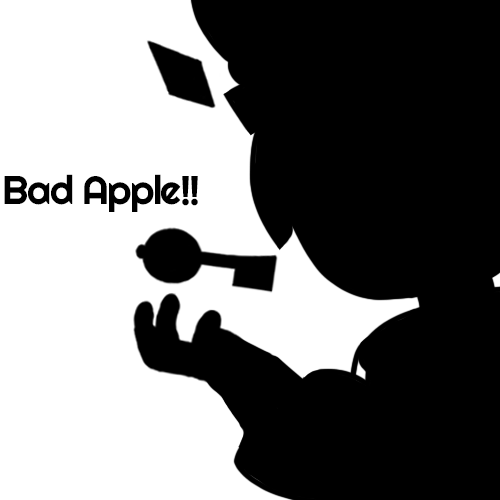
<style>
.page{position:relative;width:500px;height:500px;background:#000000}
.page>*{position:absolute;margin:0}
.t1{font:40px "Righteous-Regular";letter-spacing:-0.04em;color:#000000}
</style>
<div class="page">
<p class="t1" style="left:4px;top:174px;width:194px;height:38px">Bad Apple!!</p>
</div>
